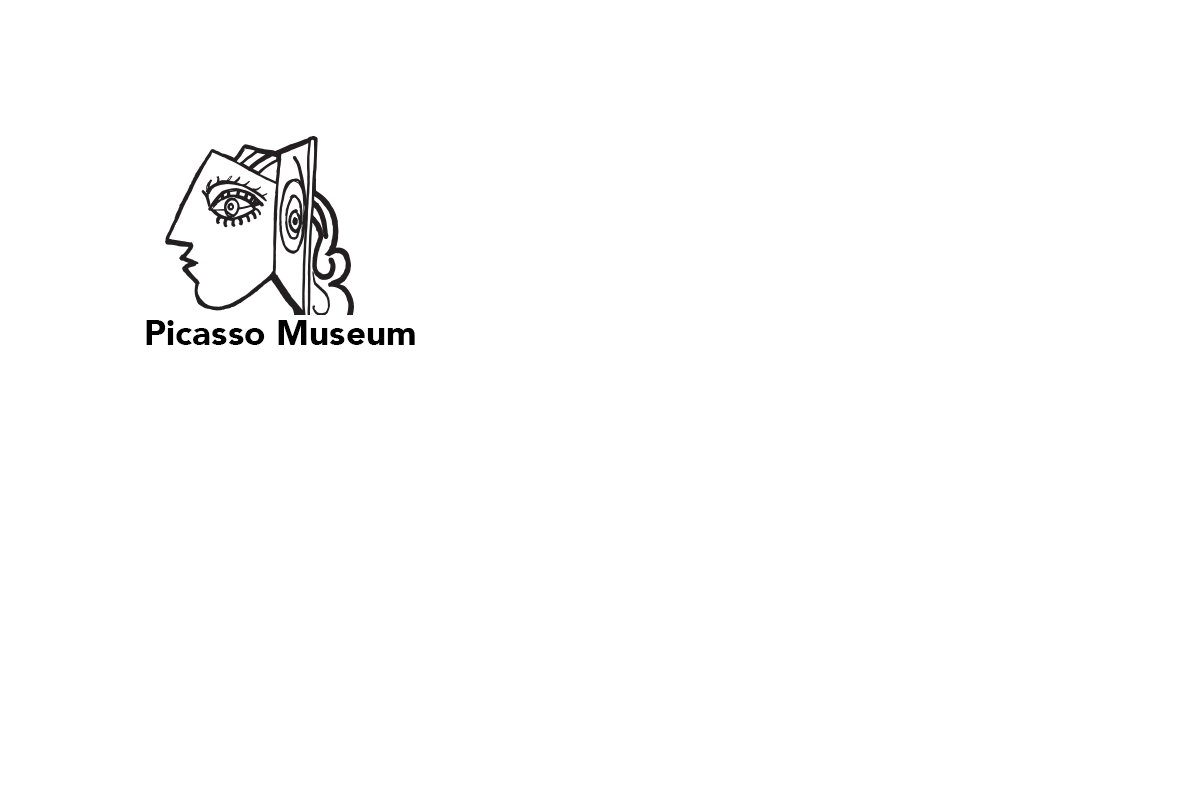
<style>
.page{position:relative;width:1200px;height:800px;background:#ffffff}
.page>*{position:absolute;margin:0}
.t1{font:34.8px "Avenir-Black";color:#000000}
</style>
<div class="page">
<p class="t1" style="left:146px;top:320px;width:269px;height:25px">Picasso Museum</p>
</div>
